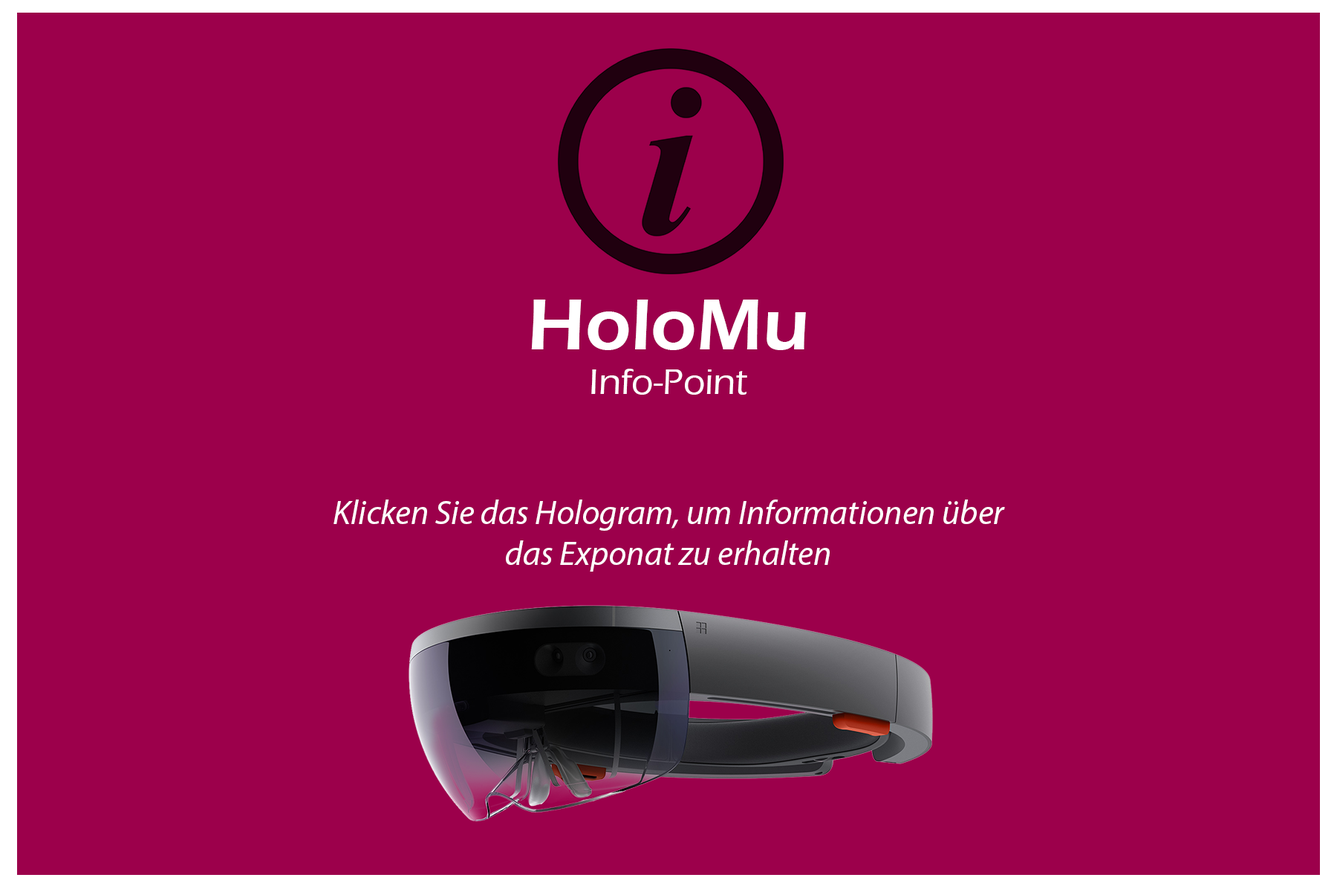
<style>
.page{position:relative;width:1337px;height:892px;background:#9c004b}
.page>*{position:absolute;margin:0}
.t1{font:34.1px "MyriadPro-It";color:#ffffff}
.t2{font:74.3px "ErasITC-Demi";color:#ffffff}
.t3{font:8.9px "ErasITC-Medium";color:#ffffff}
</style>
<div class="page">
<p class="t1" style="left:334px;top:299px;width:671px;height:272px;text-align:center"><span class="t2">HoloMu<br></span><span class="t3">Info-Point<br><br><br></span>Klicken Sie das Hologram, um Informationen über das Exponat zu erhalten</p>
</div>
